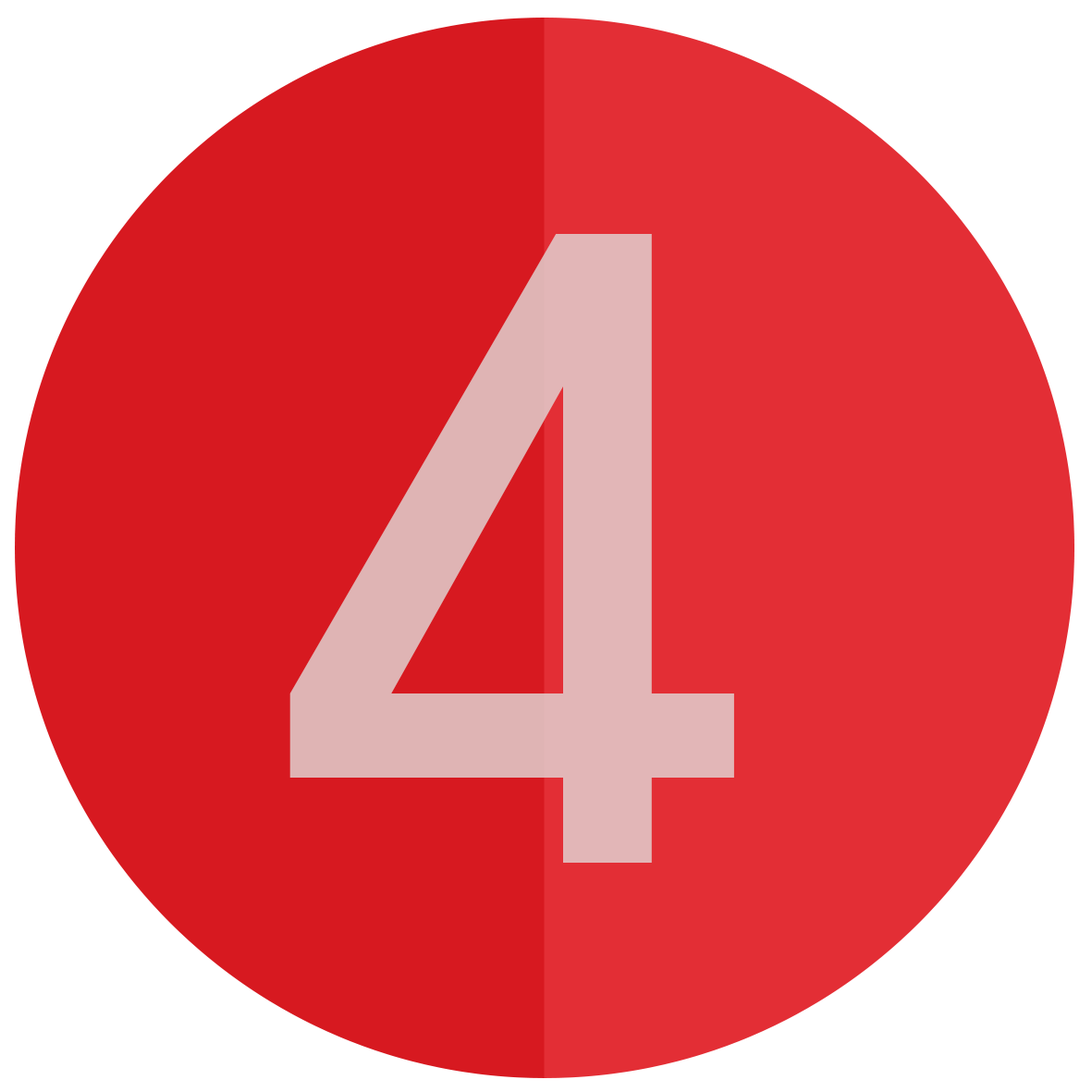
<style>
.page{position:relative;width:1092px;height:1092px;background:#d71920}
.page>*{position:absolute;margin:0}
.t1{font:886.1px "Quark-Bold";color:#e2b6b7;text-transform:uppercase}
</style>
<div class="page">
<p class="t1" style="left:289px;top:234px;width:445px;height:629px">4</p>
</div>
